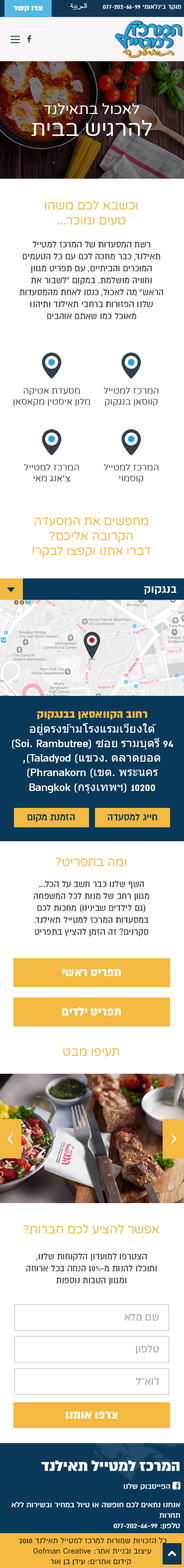
<style>
.page{position:relative;width:184px;height:1568px;background:#ffffff}
.page>*{position:absolute;margin:0}
.t1{font:14.7px/21.6px "VarelaRound-Regular";color:#ffffff}
.t2{font:21.7px/21.6px "VarelaRound-Regular";color:#ffffff}
.t3{font:12.4px "VarelaRound-Regular";color:#f3b940}
.t4{font:10px "AlmoniDLAAA";color:#464646}
.t5{font:9px "VarelaRound-Regular";color:#464646}
.t6{font:12.4px "AlmoniDLAAA-Bold";color:#ffffff}
.t7{font:12.2px "Tahoma";color:#ffffff}
.t8{font:12.2px "AlmoniDLAAA-Black";color:#ffffff}
.t9{font:12.2px "AlmoniDLAAA-Black";color:#f3b940}
.t10{font:12.2px "AlmoniDLAAA-Bold";color:#ffffff}
.t11{font:10.8px "AlmoniDLAAA-Bold";color:#093959}
.t12{font:13px "AlmoniDLAAA-Black";color:#ffffff}
.t13{font:11.9px "AlmoniDLAAA";color:#a7a9ac}
</style>
<div class="page">
<p class="t1" style="left:31px;top:103px;width:121px;height:33px;text-align:center">לאכול בתאילנד<br><span class="t2">להרגיש בבית</span></p>
<p class="t3" style="left:45px;top:200px;width:93px;height:25px;text-align:center">וכשבא לכם משהו<br>טעים ומוכר...</p>
<p class="t4" style="left:19px;top:241px;width:144px;height:78px;text-align:center">רשת המסעדות של המרכז למטייל תאילנד, כבר מחכה לכם עם כל הטעמים המוכרים והביתיים, עם תפריט מגוון<br>וחוויה מושלמת. במקום "לשבור את הראש" מה לאכול, כנסו לאחת מהמסעדות שלנו הפזורות ברחבי תאילנד ותיהנו מאוכל כמו שאתם אוהבים</p>
<p class="t5" style="left:13px;top:388px;width:77px;height:18px;text-align:center">מסעדת אטיקה<br>מלון איסטין מקאסאן</p>
<p class="t5" style="left:104px;top:387px;width:55px;height:19px;text-align:center">המרכז למטייל<br>קווסאן בנגקוק</p>
<p class="t5" style="left:24px;top:464px;width:55px;height:17px;text-align:center">המרכז למטייל<br>צ’אנג מאי</p>
<p class="t5" style="left:104px;top:464px;width:55px;height:19px;text-align:center">המרכז למטייל<br>קוסמוי</p>
<p class="t3" style="left:32px;top:518px;width:119px;height:40px;text-align:center">מחפשים את המסעדה<br>הקרובה אליכם?<br>דברו אתנו וקפצו לבקר!</p>
<p class="t6" style="left:144px;top:586px;width:33px;height:8px">בנגקוק</p>
<p class="t7" style="left:12px;top:711px;width:162px;height:82px;text-align:center"><span class="t8"><br></span><span class="t9">רחוב הקוואסאן בבנגקוק<br></span>อยู่ตรงข้ามโรงแรมเวียงใต้<span class="t10"><br>94 Soi. Rambutree) </span>ซอย รามบุตรี<span class="t10">)<br>Taladyod (</span>แขวง<span class="t10">. </span>ตลาดยอด<span class="t10">),<br>Phranakorn (</span>เขต<span class="t10">. </span>พระนคร<span class="t10">)<br>Bangkok (</span>กรุงเทพฯ<span class="t10">) 10200</span></p>
<p class="t11" style="left:27px;top:814px;width:48px;height:8px">הזמנת מקום</p>
<p class="t11" style="left:108px;top:813px;width:49px;height:8px">חייג למסעדה</p>
<p class="t3" style="left:56px;top:858px;width:70px;height:8px">ומה בתפריט?</p>
<p class="t4" style="left:33px;top:881px;width:116px;height:55px;text-align:center">השף שלנו כבר חשב על הכל...<br>מגוון רחב של מנות לכל המשפחה<br>(גם לילדים שבינינו) מחכות לכם במסעדות המרכז למטייל תאילנד.<br>סקרנים? זה הזמן להציץ בתפריט</p>
<p class="t12" style="left:62px;top:969px;width:59px;height:7px">תפריט ראשי</p>
<p class="t12" style="left:62px;top:1007px;width:59px;height:8px">תפריט ילדים</p>
<p class="t3" style="left:63px;top:1048px;width:56px;height:9px">תעיפו מבט</p>
<p class="t3" style="left:23px;top:1224px;width:136px;height:10px">אפשר להציע לכם חברות?</p>
<p class="t4" style="left:26px;top:1253px;width:131px;height:32px;text-align:center">הצטרפו למועדון הלקוחות שלנו,<br>ותוכלו להנות מ-10% הנחה בכל ארוחה ומגוון הטבות נוספות</p>
<p class="t13" style="left:125px;top:1313px;width:34px;height:8px">שם מלא</p>
<p class="t13" style="left:136px;top:1345px;width:23px;height:9px">טלפון</p>
<p class="t13" style="left:136px;top:1377px;width:23px;height:8px">דוא”ל</p>
<p class="t12" style="left:66px;top:1412px;width:52px;height:7px">צרפו אותנו</p>
</div>
